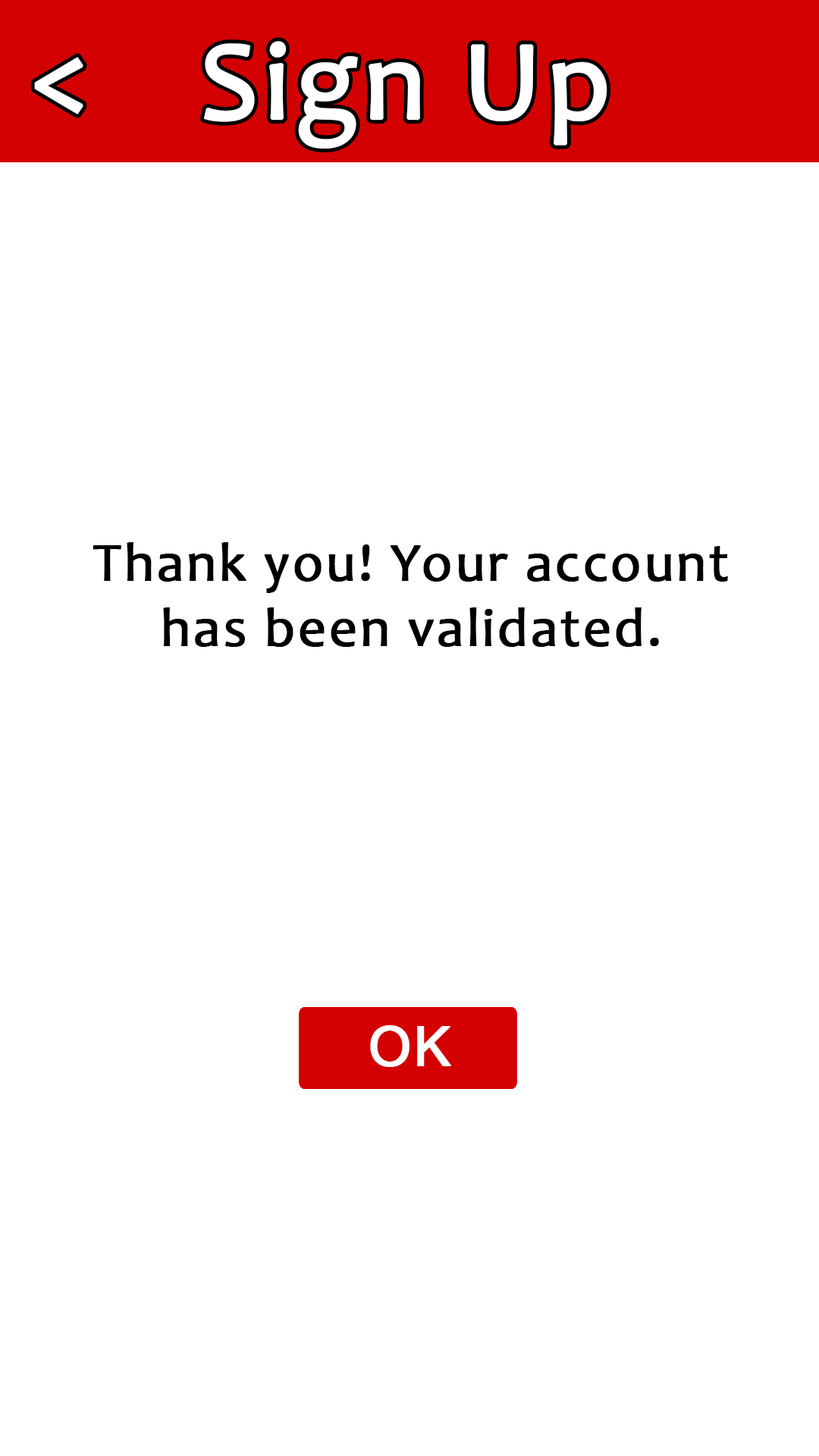
<style>
.page{position:relative;width:819px;height:1456px;background:#ffffff}
.page>*{position:absolute;margin:0}
.t1{font:113.4px "Candara";letter-spacing:0.03em;color:#ffffff;font-weight:bold}
.t2{font:113.7px "Candara";letter-spacing:0.03em;color:#ffffff;font-weight:bold}
.t3{font:54.6px "Candara";letter-spacing:0.03em;color:#000000;font-weight:bold}
.t4{font:54.6px "ArialMT";letter-spacing:0.03em;color:#ffffff;font-weight:bold}
</style>
<div class="page">
<p class="t1" style="left:203px;top:41px;width:404px;height:108px">Sign Up</p>
<p class="t2" style="left:34px;top:57px;width:49px;height:58px">&lt;</p>
<p class="t3" style="left:93px;top:542px;width:635px;height:105px;text-align:center">Thank you! Your account<br>has been validated.</p>
<p class="t4" style="left:370px;top:1025px;width:81px;height:42px">OK</p>
</div>
